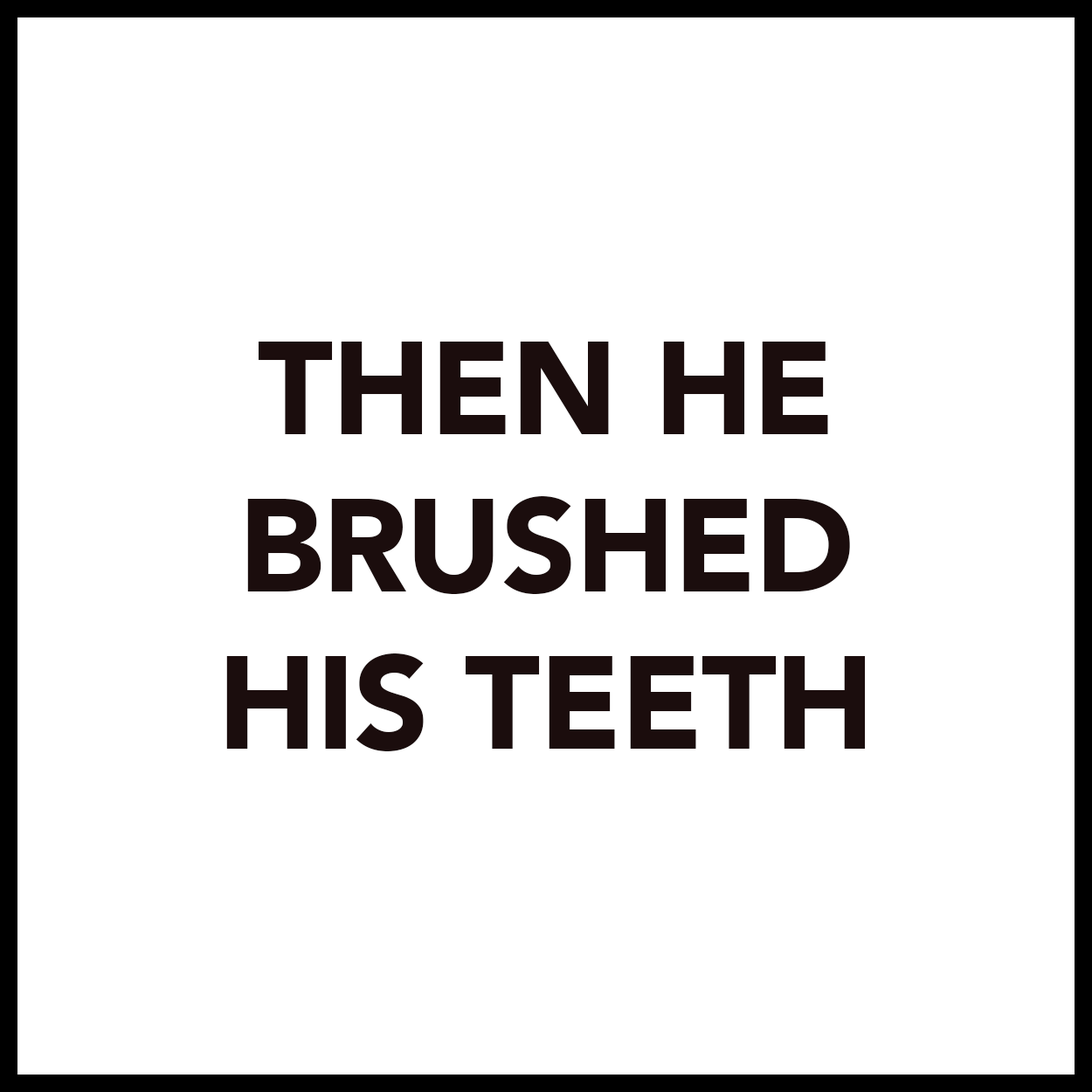
<style>
.page{position:relative;width:1092px;height:1092px;background:#ffffff}
.page>*{position:absolute;margin:0}
.t1{font:131px "Avenir-Black";letter-spacing:-0.01em;color:#1b0d0d}
</style>
<div class="page">
<p class="t1" style="left:226px;top:342px;width:640px;height:409px;text-align:center">THEN HE<br>BRUSHED<br>HIS TEETH</p>
</div>
